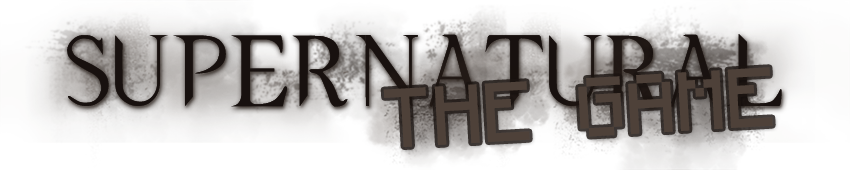
<style>
.page{position:relative;width:850px;height:170px}
.page>*{position:absolute;margin:0}
.t1{font:66.9px "SupernaturalKnight";color:#18110f;text-transform:uppercase}
.t2{font:66.9px "Minecraftia";color:#4c4743;text-transform:uppercase}
</style>
<div class="page">
<p class="t1" style="left:67px;top:34px;width:715px;height:73px">Supernatural</p>
<p class="t1" style="left:67px;top:34px;width:715px;height:73px">Supernatural</p>
<p class="t2" style="left:383px;top:67px;width:390px;height:80px;rotate:-3deg">The Game</p>
</div>
